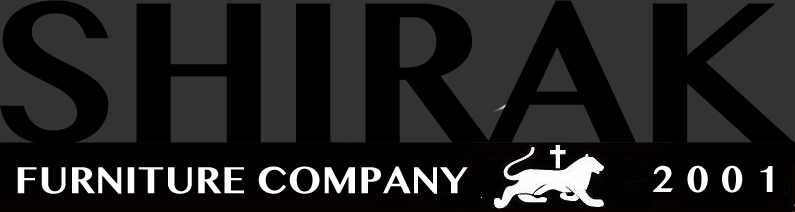
<style>
.page{position:relative;width:795px;height:212px;background:#333333}
.page>*{position:absolute;margin:0}
.t1{font:37.5px "GurmukhiMN-Bold";color:#ffffff}
</style>
<div class="page">
<p class="t1" style="left:17px;top:166px;width:451px;height:28px">FURNITURE COMPANY</p>
<p class="t1" style="left:653px;top:165px;width:120px;height:28px">2 0 0 1</p>
</div>
